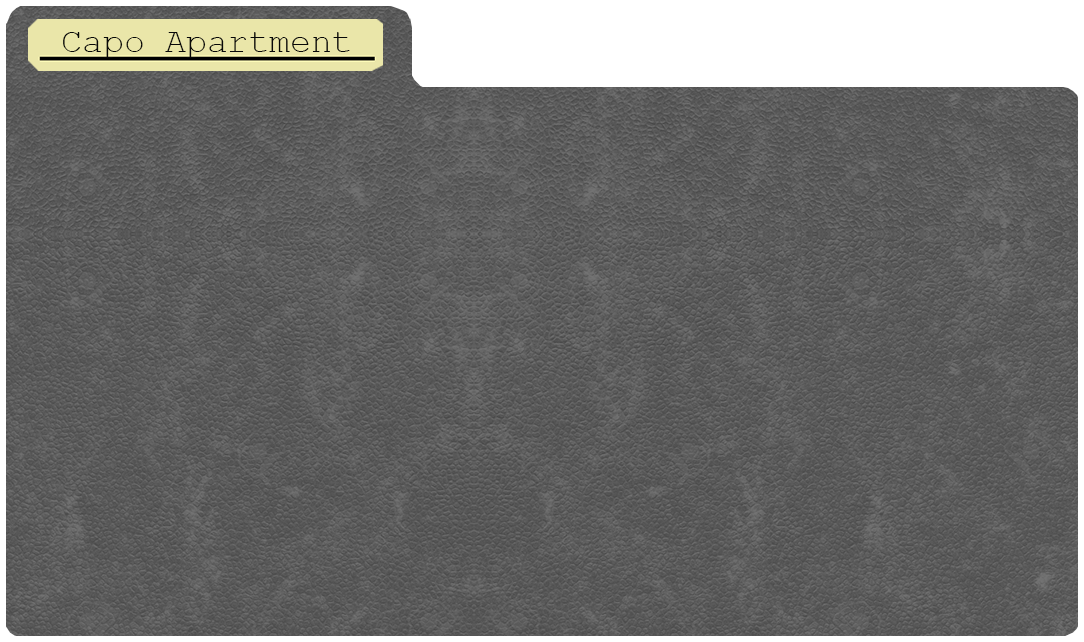
<style>
.page{position:relative;width:1084px;height:642px}
.page>*{position:absolute;margin:0}
.t1{font:34.5px "CourierNewPSMT";color:#070707}
</style>
<div class="page">
<p class="t1" style="left:63px;top:32px;width:287px;height:26px">Capo Apartment</p>
</div>
